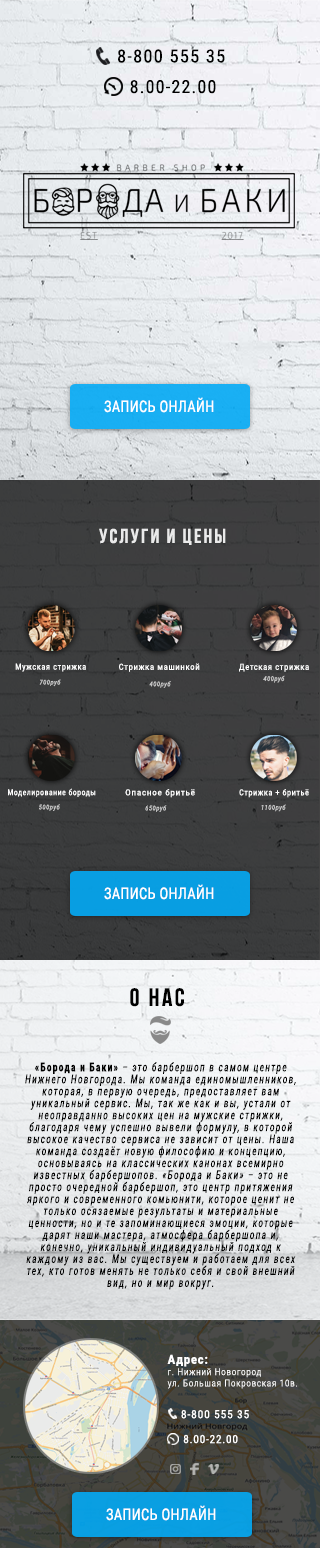
<style>
.page{position:relative;width:320px;height:1548px}
.page>*{position:absolute;margin:0}
.t1{font:18px "RobotoCondensed-Regular";letter-spacing:0.065em;color:#000000}
.t2{font:16px "RobotoCondensed-Regular";letter-spacing:0.025em;color:#ffffff;scale:0.9 1}
.t3{font:20px "BebasNeueBold";letter-spacing:0.105em;color:#eaeaea}
.t4{font:8.5px "RobotoCondensed-Regular";letter-spacing:0.065em;color:#ffffff}
.t5{font:8.5px "RobotoCondensed-Regular";letter-spacing:0.065em;color:#ffffff;scale:1.04 1}
.t6{font:6.7px "RobotoCondensed-Italic";letter-spacing:0.065em;color:#cbcbcb}
.t7{font:8.3px "RobotoCondensed-Regular";letter-spacing:0.065em;color:#ffffff;scale:0.94 1}
.t8{font:8.3px "RobotoCondensed-Regular";letter-spacing:0.065em;color:#ffffff;scale:1.13 1}
.t9{font:8.3px "RobotoCondensed-Regular";letter-spacing:0.065em;color:#ffffff}
.t10{font:25px "BebasNeueBold";letter-spacing:0.105em;color:#000000}
.t11{font:12.1px/12px "RobotoCondensed-Italic";letter-spacing:0.125em;color:#000000;scale:0.79 1}
.t12{font:12.1px/12px "RobotoCondensed-Bold";letter-spacing:0.125em;color:#000000;scale:0.79 1}
.t13{font:9.4px "RobotoCondensed-Light";letter-spacing:0.065em;color:#ffffff}
.t14{font:12.6px "RobotoCondensed-Bold";letter-spacing:0.065em;color:#ffffff}
.t15{font:11.3px "RobotoCondensed-Regular";letter-spacing:0.065em;color:#ffffff;scale:1.03 1}
.t16{font:11.3px "RobotoCondensed-Regular";letter-spacing:0.065em;color:#ffffff}
</style>
<div class="page">
<p class="t1" style="left:118px;top:49px;width:107px;height:14px">8-800 555 35</p>
<p class="t1" style="left:130px;top:80px;width:86px;height:14px">8.00-22.00</p>
<p class="t2" style="left:104px;top:397px;width:110px;height:16px">ЗАПИСЬ ОНЛАЙН</p>
<p class="t3" style="left:99px;top:528px;width:127px;height:17px">Услуги и цены</p>
<p class="t4" style="left:15px;top:663px;width:71px;height:9px">Мужская стрижка</p>
<p class="t5" style="left:119px;top:663px;width:81px;height:9px">Стрижка машинкой</p>
<p class="t4" style="left:239px;top:663px;width:70px;height:9px">Детская стрижка</p>
<p class="t6" style="left:263px;top:675px;width:22px;height:8px">400руб</p>
<p class="t6" style="left:39px;top:679px;width:22px;height:8px">700руб</p>
<p class="t6" style="left:149px;top:681px;width:22px;height:7px">400руб</p>
<p class="t7" style="left:8px;top:788px;width:88px;height:9px">Моделирование бороды</p>
<p class="t8" style="left:125px;top:789px;width:70px;height:9px">Опасное бритьё</p>
<p class="t9" style="left:239px;top:789px;width:70px;height:9px">Стрижка + бритьё</p>
<p class="t6" style="left:39px;top:804px;width:21px;height:7px">500руб</p>
<p class="t6" style="left:145px;top:805px;width:22px;height:7px">650руб</p>
<p class="t6" style="left:261px;top:804px;width:25px;height:8px">1100руб</p>
<p class="t2" style="left:104px;top:884px;width:110px;height:16px">ЗАПИСЬ ОНЛАЙН</p>
<p class="t10" style="left:130px;top:988px;width:54px;height:19px">о нас</p>
<p class="t11" style="left:25px;top:1062px;width:271px;height:228px;text-align:center"><span class="t12">«Борода и Баки»</span> – это барбершоп в самом центре Нижнего Новгорода. Мы команда единомышленников, которая, в первую очередь, предоставляет вам уникальный сервис. Мы, так же как и вы, устали от неоправданно высоких цен на мужские стрижки, благодаря чему успешно вывели формулу, в которой высокое качество сервиса не зависит от цены. Наша команда создаёт новую философию и концепцию, основываясь на классических канонах всемирно известных барбершопов. «Борода и Баки» – это не просто очередной барбершоп, это центр притяжения яркого и современного комьюнити, которое ценит не только осязаемые результаты и материальные ценности, но и те запоминающиеся эмоции, которые дарят наши мастера, атмосфера барбершопа и, конечно, уникальный индивидуальный подход к каждому из вас. Мы существуем и работаем для всех тех, кто готов менять не только себя и свой внешний вид, но и мир вокруг.</p>
<p class="t13" style="left:167px;top:1354px;width:130px;height:35px"><span class="t14">Адрес:<br></span>г. Нижний Новогород <br>ул. Большая Покровская 10в.</p>
<p class="t15" style="left:181px;top:1410px;width:68px;height:9px">8-800 555 35</p>
<p class="t16" style="left:183px;top:1434px;width:55px;height:10px">8.00-22.00</p>
<p class="t2" style="left:106px;top:1505px;width:110px;height:16px">ЗАПИСЬ ОНЛАЙН</p>
</div>
